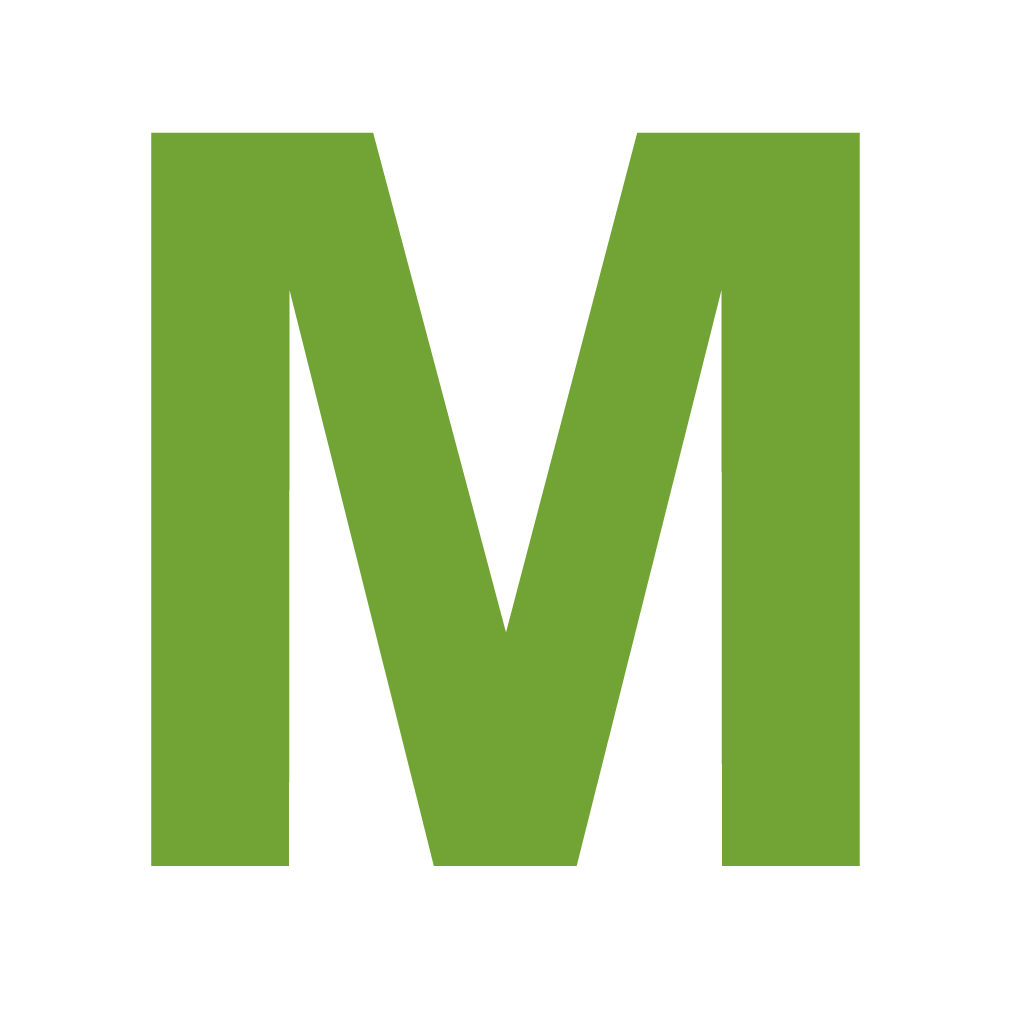
<style>
.page{position:relative;width:1024px;height:1024px;background:#ffffff}
.page>*{position:absolute;margin:0}
.t1{font:1024px "Arial-BoldMT";color:#72a435}
</style>
<div class="page">
<p class="t1" style="left:151px;top:132px;width:709px;height:734px">M</p>
</div>
